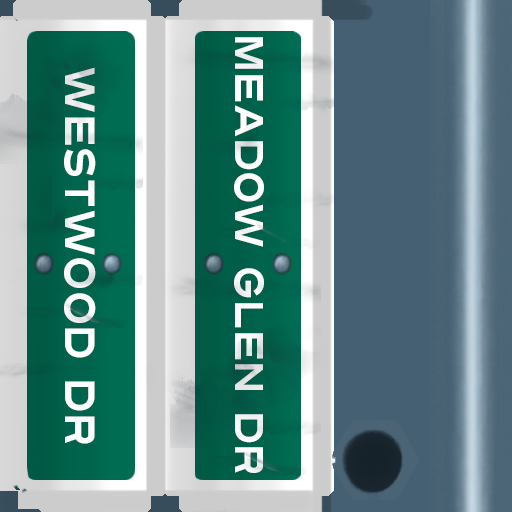
<style>
.page{position:relative;width:512px;height:512px}
.page>*{position:absolute;margin:0}
.t1{font:40px "Turnpike";color:#fefeff;scale:0.75 1}
.t2{font:42px "Turnpike";color:#fefeff;scale:0.75 1}
</style>
<div class="page">
<p class="t1" style="left:234px;top:37px;width:30px;height:436px;rotate:90deg">Meadow Glen Dr</p>
<p class="t2" style="left:64px;top:67px;width:32px;height:377px;rotate:90deg">Westwood Dr</p>
</div>
